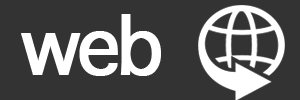
<style>
.page{position:relative;width:300px;height:100px;background:#333333}
.page>*{position:absolute;margin:0}
.t1{font:76.4px "Thonburi";letter-spacing:-0.075em;color:#ffffff;font-weight:bold}
</style>
<div class="page">
<p class="t1" style="left:21px;top:14px;width:140px;height:62px">web</p>
</div>
